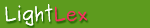
<style>
.page{position:relative;width:150px;height:28px;background:#5d9b1e}
.page>*{position:absolute;margin:0}
.t1{font:18px "Purisa";color:#ffffff}
.t2{font:18px "Purisa";color:#f1355c}
</style>
<div class="page">
<p class="t1" style="left:5px;top:4px;width:82px;height:22px">Light<span class="t2">Lex</span></p>
<p class="t1" style="left:5px;top:4px;width:82px;height:22px">Light<span class="t2">Lex</span></p>
</div>
